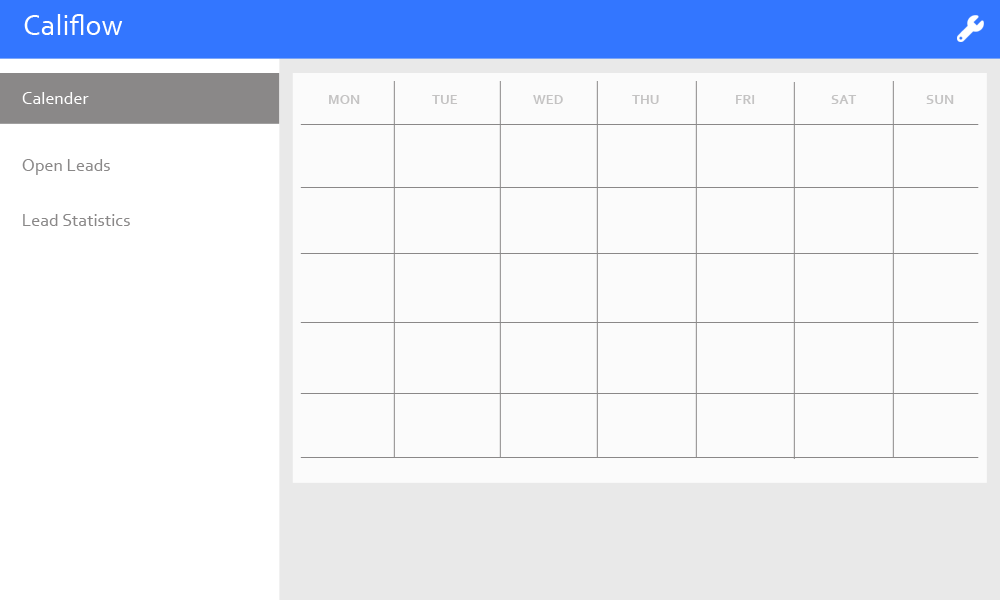
<style>
.page{position:relative;width:1000px;height:600px;background:#fbfbfb}
.page>*{position:absolute;margin:0}
.t1{font:30px "Corbel";color:#ffffff}
.t2{font:18px "Corbel";color:#ffffff}
.t3{font:14px "Corbel-Bold";color:#c4c3c3}
.t4{font:18px "Corbel";color:#8a8888}
</style>
<div class="page">
<p class="t1" style="left:24px;top:14px;width:99px;height:21px">Califlow</p>
<p class="t2" style="left:22px;top:92px;width:67px;height:12px">Calender</p>
<p class="t3" style="left:329px;top:95px;width:31px;height:9px">MON</p>
<p class="t3" style="left:432px;top:95px;width:26px;height:9px">TUE</p>
<p class="t3" style="left:533px;top:95px;width:30px;height:9px">WED</p>
<p class="t3" style="left:632px;top:95px;width:27px;height:9px">THU</p>
<p class="t3" style="left:736px;top:95px;width:19px;height:9px">FRI</p>
<p class="t3" style="left:831px;top:95px;width:26px;height:9px">SAT</p>
<p class="t3" style="left:926px;top:95px;width:28px;height:9px">SUN</p>
<p class="t4" style="left:22px;top:159px;width:88px;height:16px">Open Leads</p>
<p class="t4" style="left:23px;top:214px;width:107px;height:12px">Lead Statistics</p>
</div>
